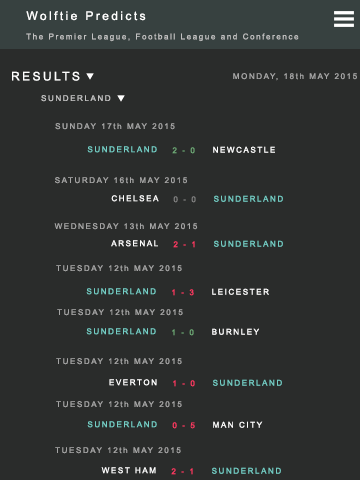
<style>
.page{position:relative;width:360px;height:480px;background:#2a2c2b}
.page>*{position:absolute;margin:0}
.t1{font:12px "ArialMT";letter-spacing:0.2em;color:#ffffff}
.t2{font:8px "ArialMT";letter-spacing:0.2em;color:#c2c2c2}
.t3{font:8px "ArialMT";letter-spacing:0.2em;color:#a5a5a5}
.t4{font:8px "ArialMT";letter-spacing:0.2em;color:#74cec5}
.t5{font:8px "ArialMT";letter-spacing:0.2em;color:#6faa77}
.t6{font:8px "ArialMT";letter-spacing:0.2em;color:#ffffff}
.t7{font:8px "ArialMT";letter-spacing:0.2em;color:#838383}
.t8{font:8px "ArialMT";letter-spacing:0.2em;color:#ff3963}
</style>
<div class="page">
<p class="t1" style="left:26px;top:11px;width:120px;height:10px">Wolftie Predicts</p>
<p class="t2" style="left:26px;top:33px;width:273px;height:9px">The Premier League, Football League and Conference</p>
<p class="t1" style="left:12px;top:71px;width:68px;height:10px">RESULTS</p>
<p class="t3" style="left:233px;top:73px;width:124px;height:8px">MONDAY, 18th MAY 2015</p>
<p class="t2" style="left:41px;top:95px;width:70px;height:7px">SUNDERLAND</p>
<p class="t3" style="left:55px;top:123px;width:120px;height:7px">SUNDAY 17th MAY 2015</p>
<p class="t4" style="left:87px;top:146px;width:70px;height:7px">SUNDERLAND</p>
<p class="t5" style="left:172px;top:147px;width:23px;height:7px">2 - 0</p>
<p class="t6" style="left:213px;top:146px;width:62px;height:7px">NEWCASTLE</p>
<p class="t3" style="left:55px;top:177px;width:132px;height:7px">SATURDAY 16th MAY 2015</p>
<p class="t6" style="left:111px;top:195px;width:48px;height:7px">CHELSEA</p>
<p class="t7" style="left:173px;top:196px;width:23px;height:7px">0 - 0</p>
<p class="t4" style="left:214px;top:195px;width:69px;height:7px">SUNDERLAND</p>
<p class="t3" style="left:54px;top:223px;width:144px;height:7px">WEDNESDAY 13th MAY 2015</p>
<p class="t6" style="left:111px;top:240px;width:47px;height:7px">ARSENAL</p>
<p class="t8" style="left:173px;top:241px;width:22px;height:7px">2 - 1</p>
<p class="t4" style="left:214px;top:240px;width:69px;height:7px">SUNDERLAND</p>
<p class="t3" style="left:56px;top:265px;width:126px;height:7px">TUESDAY 12th MAY 2015</p>
<p class="t4" style="left:86px;top:288px;width:70px;height:7px">SUNDERLAND</p>
<p class="t8" style="left:172px;top:289px;width:22px;height:7px">1 - 3</p>
<p class="t6" style="left:212px;top:288px;width:57px;height:7px">LEICESTER</p>
<p class="t3" style="left:57px;top:309px;width:126px;height:7px">TUESDAY 12th MAY 2015</p>
<p class="t4" style="left:86px;top:328px;width:70px;height:7px">SUNDERLAND</p>
<p class="t5" style="left:172px;top:329px;width:22px;height:7px">1 - 0</p>
<p class="t6" style="left:212px;top:328px;width:47px;height:7px">BURNLEY</p>
<p class="t3" style="left:56px;top:358px;width:126px;height:7px">TUESDAY 12th MAY 2015</p>
<p class="t6" style="left:109px;top:379px;width:48px;height:7px">EVERTON</p>
<p class="t8" style="left:173px;top:380px;width:22px;height:7px">1 - 0</p>
<p class="t4" style="left:213px;top:379px;width:69px;height:7px">SUNDERLAND</p>
<p class="t3" style="left:56px;top:401px;width:126px;height:7px">TUESDAY 12th MAY 2015</p>
<p class="t4" style="left:87px;top:421px;width:70px;height:7px">SUNDERLAND</p>
<p class="t8" style="left:172px;top:422px;width:23px;height:7px">0 - 5</p>
<p class="t6" style="left:213px;top:421px;width:50px;height:7px">MAN CITY</p>
<p class="t3" style="left:55px;top:447px;width:126px;height:7px">TUESDAY 12th MAY 2015</p>
<p class="t6" style="left:101px;top:467px;width:55px;height:7px">WEST HAM</p>
<p class="t8" style="left:171px;top:468px;width:22px;height:7px">2 - 1</p>
<p class="t4" style="left:212px;top:467px;width:69px;height:7px">SUNDERLAND</p>
</div>
